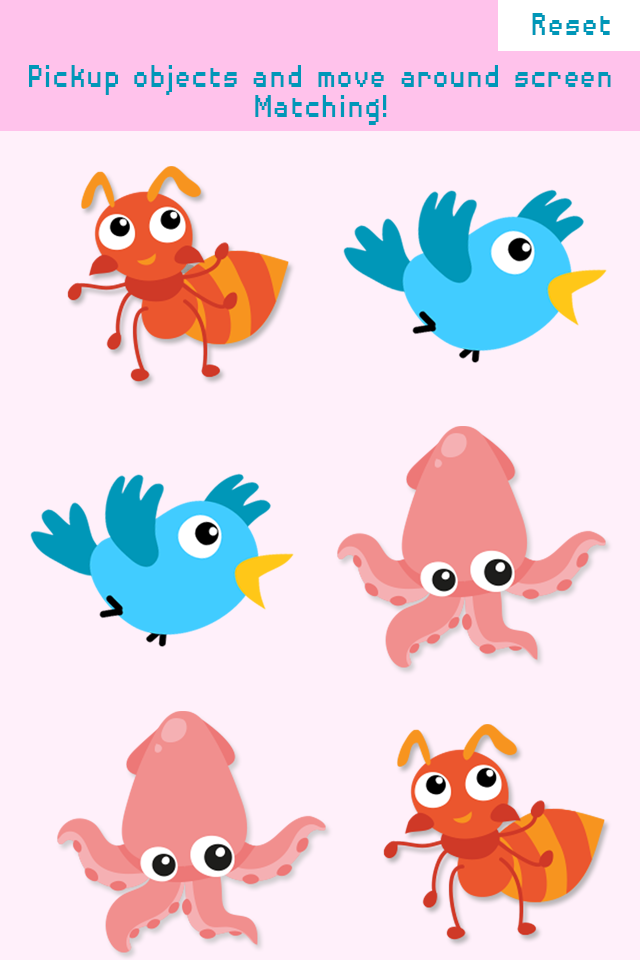
<style>
.page{position:relative;width:640px;height:960px;background:#fff0fa}
.page>*{position:absolute;margin:0}
.t1{font:42.3px "DisposableDroidBB";color:#0097b8;scale:0.83 1}
.t2{font:42.3px/30px "DisposableDroidBB";color:#0097b8;scale:0.83 1}
</style>
<div class="page">
<p class="t1" style="left:532px;top:13px;width:78px;height:22px">Reset</p>
<p class="t2" style="left:29px;top:65px;width:582px;height:60px;text-align:center">Pickup objects and move around screen<br>Matching!</p>
</div>
